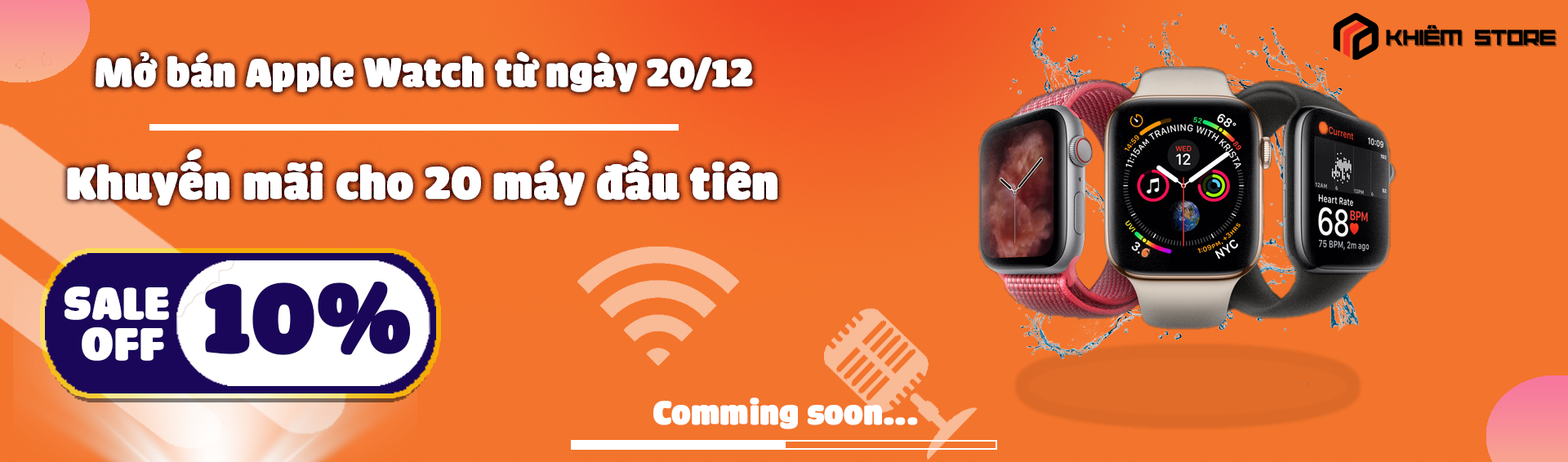
<style>
.page{position:relative;width:1568px;height:462px;background:#f3742c}
.page>*{position:absolute;margin:0}
.t1{font:40.8px "iCielCadena";color:#ffffff;font-weight:bold}
.t2{font:47.6px "iCielCadena";color:#ffffff;font-weight:bold}
.t3{font:102.1px "iCielCadena";color:#1a075a;font-weight:bold}
.t4{font:47.6px/20.4px "iCielCadena";color:#ffffff;font-weight:bold}
.t5{font:34px "iCielCadena";color:#ffffff;font-weight:bold}
</style>
<div class="page">
<p class="t1" style="left:96px;top:51px;width:657px;height:41px">Mở bán Apple Watch từ ngày 20/12</p>
<p class="t2" style="left:67px;top:149px;width:710px;height:57px">Khuyến mãi cho 20 máy đầu tiên</p>
<p class="t3" style="left:205px;top:281px;width:206px;height:74px">10%</p>
<p class="t4" style="left:65px;top:287px;width:104px;height:74px;text-align:center">SALE <br><br>OFF</p>
<p class="t5" style="left:653px;top:398px;width:265px;height:32px">Comming soon...</p>
</div>
